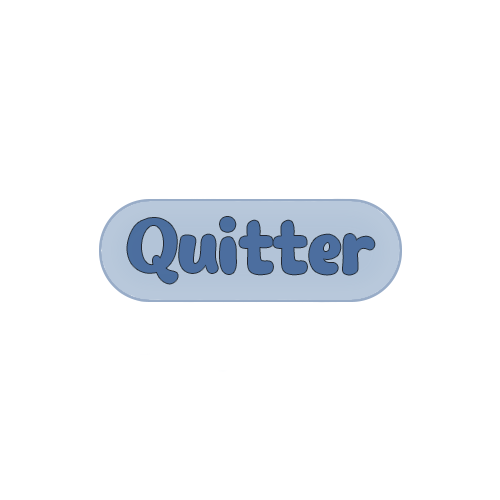
<style>
.page{position:relative;width:500px;height:500px;background:#ffffff}
.page>*{position:absolute;margin:0}
.t1{font:75.6px "Next-Bro";color:#4c6e9f}
</style>
<div class="page">
<p class="t1" style="left:127px;top:217px;width:248px;height:67px">Quitter</p>
</div>
